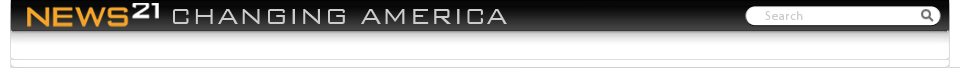
<style>
.page{position:relative;width:960px;height:68px;background:#ffffff}
.page>*{position:absolute;margin:0}
.t1{font:30px "BankGothicBT-Light";color:#cccccc}
.t2{font:12px "MyriadPro-Regular";letter-spacing:0.075em;color:#cccccc}
</style>
<div class="page">
<p class="t1" style="left:173px;top:9px;width:334px;height:15px">CHANGING AMERICA</p>
<p class="t2" style="left:765px;top:11px;width:38px;height:9px">Search</p>
</div>
